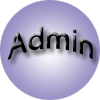
<style>
.page{position:relative;width:100px;height:100px}
.page>*{position:absolute;margin:0}
.t1{font:30px "ArialMT";color:#000000}
</style>
<div class="page">
<p class="t1" style="left:7px;top:26px;width:86px;height:34px">Admin</p>
</div>
